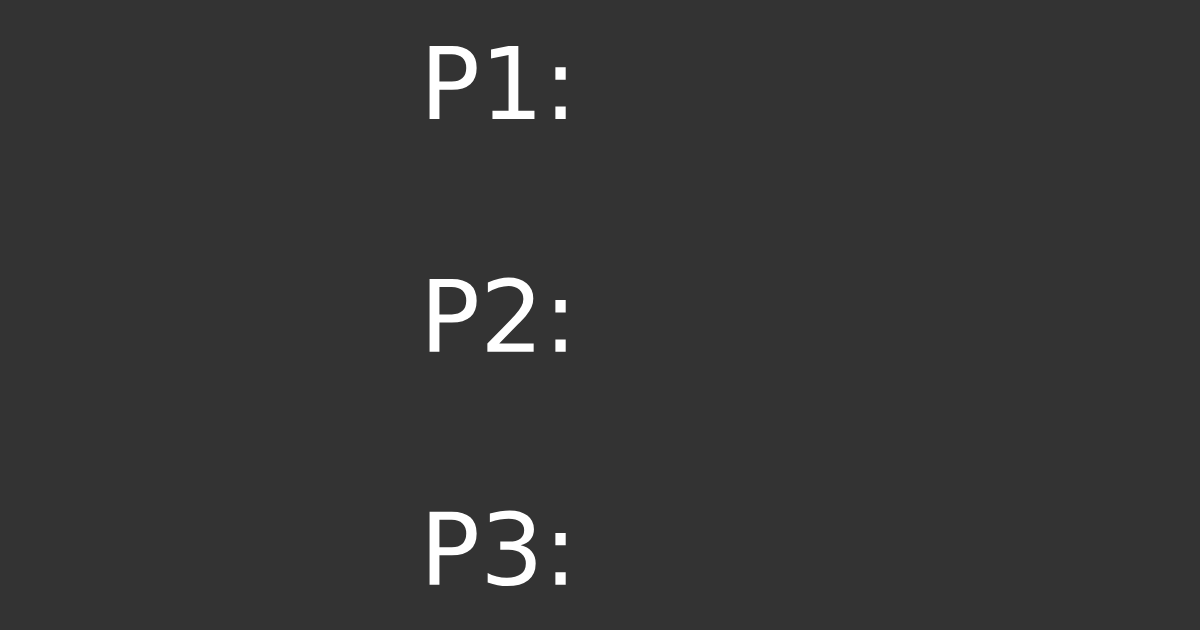
<style>
.page{position:relative;width:1200px;height:630px;background:#333333}
.page>*{position:absolute;margin:0}
.t1{font:100px "DejaVuSans";color:#ffffff}
</style>
<div class="page">
<p class="t1" style="left:429px;top:46px;width:137px;height:541px">P1:<br><br>P2:<br><br>P3:</p>
</div>
